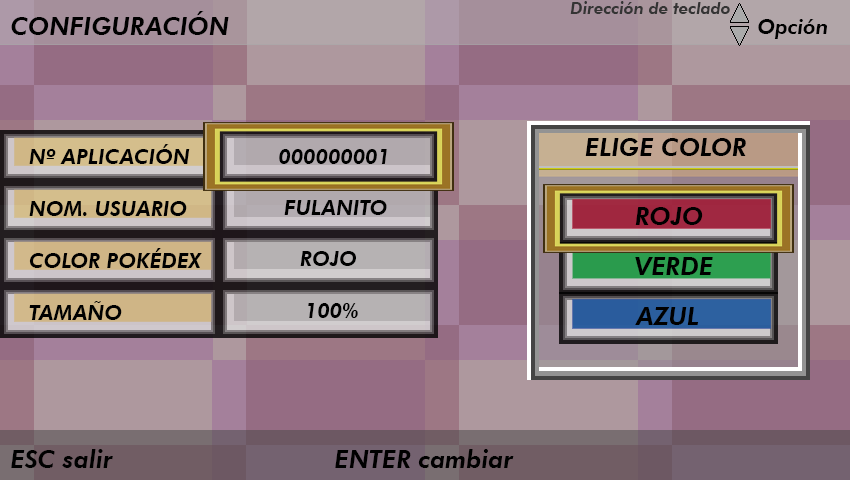
<style>
.page{position:relative;width:850px;height:480px}
.page>*{position:absolute;margin:0}
.t1{font:16.7px "FuturaBT-HeavyItalic";color:#343434}
.t2{font:25px "FuturaBT-HeavyItalic";color:#000000}
.t3{font:20.8px "FuturaBT-HeavyItalic";color:#000000}
</style>
<div class="page">
<p class="t1" style="left:570px;top:1px;width:160px;height:13px">Dirección de teclado</p>
<p class="t2" style="left:11px;top:11px;width:218px;height:24px">CONFIGURACIÓN</p>
<p class="t3" style="left:758px;top:19px;width:69px;height:20px">Opción</p>
<p class="t3" style="left:29px;top:144px;width:161px;height:20px">Nº APLICACIÓN</p>
<p class="t3" style="left:279px;top:149px;width:108px;height:15px">000000001</p>
<p class="t2" style="left:585px;top:138px;width:161px;height:18px">ELIGE COLOR</p>
<p class="t3" style="left:29px;top:201px;width:158px;height:15px">NOM. USUARIO</p>
<p class="t3" style="left:284px;top:200px;width:103px;height:15px">FULANITO</p>
<p class="t2" style="left:635px;top:207px;width:68px;height:18px">ROJO</p>
<p class="t3" style="left:29px;top:248px;width:173px;height:20px">COLOR POKÉDEX</p>
<p class="t3" style="left:300px;top:251px;width:56px;height:15px">ROJO</p>
<p class="t2" style="left:635px;top:257px;width:78px;height:18px">VERDE</p>
<p class="t3" style="left:29px;top:301px;width:93px;height:19px">TAMAÑO</p>
<p class="t3" style="left:308px;top:303px;width:50px;height:15px">100%</p>
<p class="t2" style="left:635px;top:307px;width:64px;height:18px">AZUL</p>
<p class="t2" style="left:11px;top:449px;width:503px;height:19px">ESC salir         ENTER cambiar</p>
</div>
